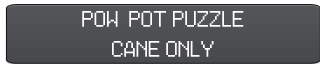
<style>
.page{position:relative;width:320px;height:64px}
.page>*{position:absolute;margin:0}
.t1{font:18px "ZeldaOracles";color:#ffffff}
</style>
<div class="page">
<p class="t1" style="left:82px;top:11px;width:162px;height:46px;text-align:center">POW  POT PUZZLE <br>CANE ONLY</p>
</div>
